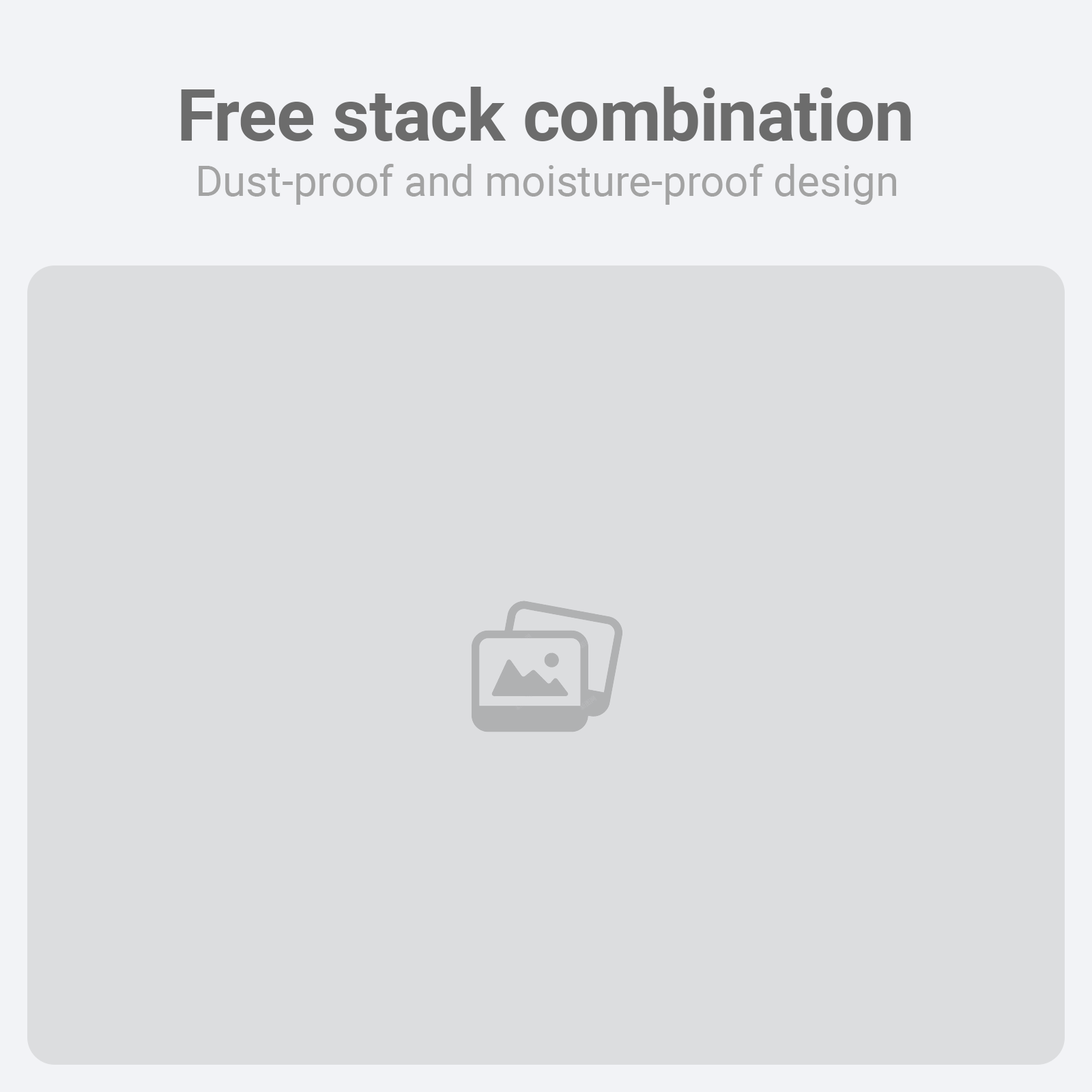
<style>
.page{position:relative;width:1092px;height:1092px;background:#dcdddf}
.page>*{position:absolute;margin:0}
.t1{font:71.3px "Roboto-Bold";color:#6c6c6c}
.t2{font:42.2px "Roboto-Regular";color:#a3a3a3}
</style>
<div class="page">
<p class="t1" style="left:181px;top:87px;width:730px;height:54px">Free stack combination</p>
<p class="t2" style="left:199px;top:164px;width:697px;height:41px">Dust-proof and moisture-proof design</p>
</div>
